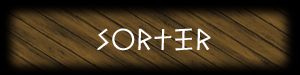
<style>
.page{position:relative;width:300px;height:75px}
.page>*{position:absolute;margin:0}
.t1{font:32px "Alfabetix";color:#ffffff}
</style>
<div class="page">
<p class="t1" style="left:96px;top:28px;width:115px;height:23px">sortir</p>
</div>
